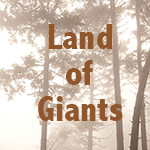
<style>
.page{position:relative;width:150px;height:150px}
.page>*{position:absolute;margin:0}
.t1{font:36px/36px "AbadiMT-CondensedExtraBold";color:#91562b}
</style>
<div class="page">
<p class="t1" style="left:38px;top:24px;width:85px;height:97px;text-align:center">Land<br>of<br>Giants</p>
</div>
